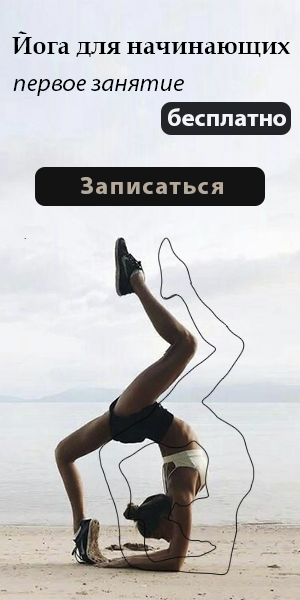
<style>
.page{position:relative;width:300px;height:600px}
.page>*{position:absolute;margin:0}
.t1{font:25px "BookAntiqua-Bold";color:#000000}
.t2{font:25px "MyriadPro-It";color:#000000}
.t3{font:25px "MyriadPro-Bold";color:#f4f5f7}
.t4{font:25px "MyriadPro-Bold";letter-spacing:0.06em;color:#b4a99a}
</style>
<div class="page">
<p class="t1" style="left:12px;top:31px;width:278px;height:26px">Йога для начинающих</p>
<p class="t2" style="left:13px;top:79px;width:171px;height:17px">первое занятие</p>
<p class="t3" style="left:168px;top:108px;width:118px;height:18px">бесплатно</p>
<p class="t4" style="left:80px;top:177px;width:143px;height:17px">Записаться</p>
</div>
